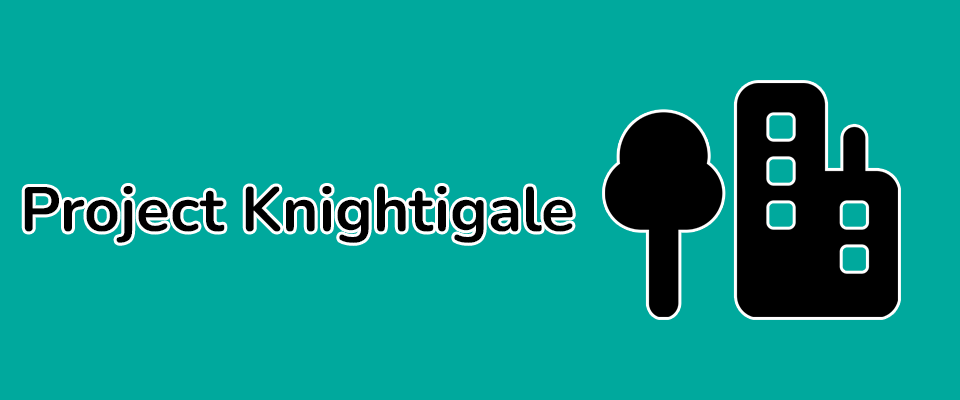
<style>
.page{position:relative;width:960px;height:400px;background:#00a99d}
.page>*{position:absolute;margin:0}
.t1{font:62.5px "Nunito-Bold";color:#000000}
</style>
<div class="page">
<p class="t1" style="left:24px;top:186px;width:549px;height:57px">Project Knightigale</p>
</div>
